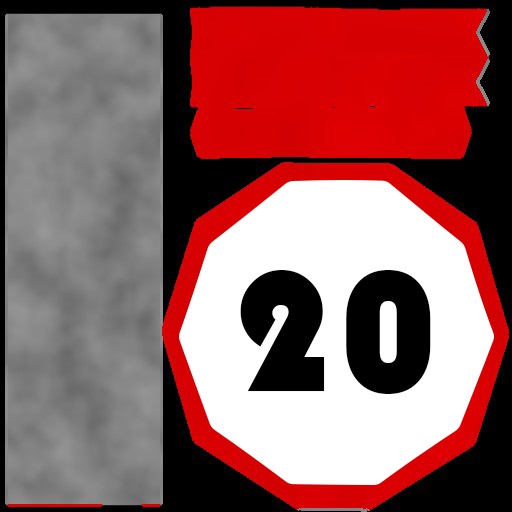
<style>
.page{position:relative;width:512px;height:512px;background:#ffffff}
.page>*{position:absolute;margin:0}
.t1{font:177.1px "Bauhaus93";letter-spacing:0.03em;color:#000000}
</style>
<div class="page">
<p class="t1" style="left:240px;top:270px;width:191px;height:124px">20</p>
</div>
